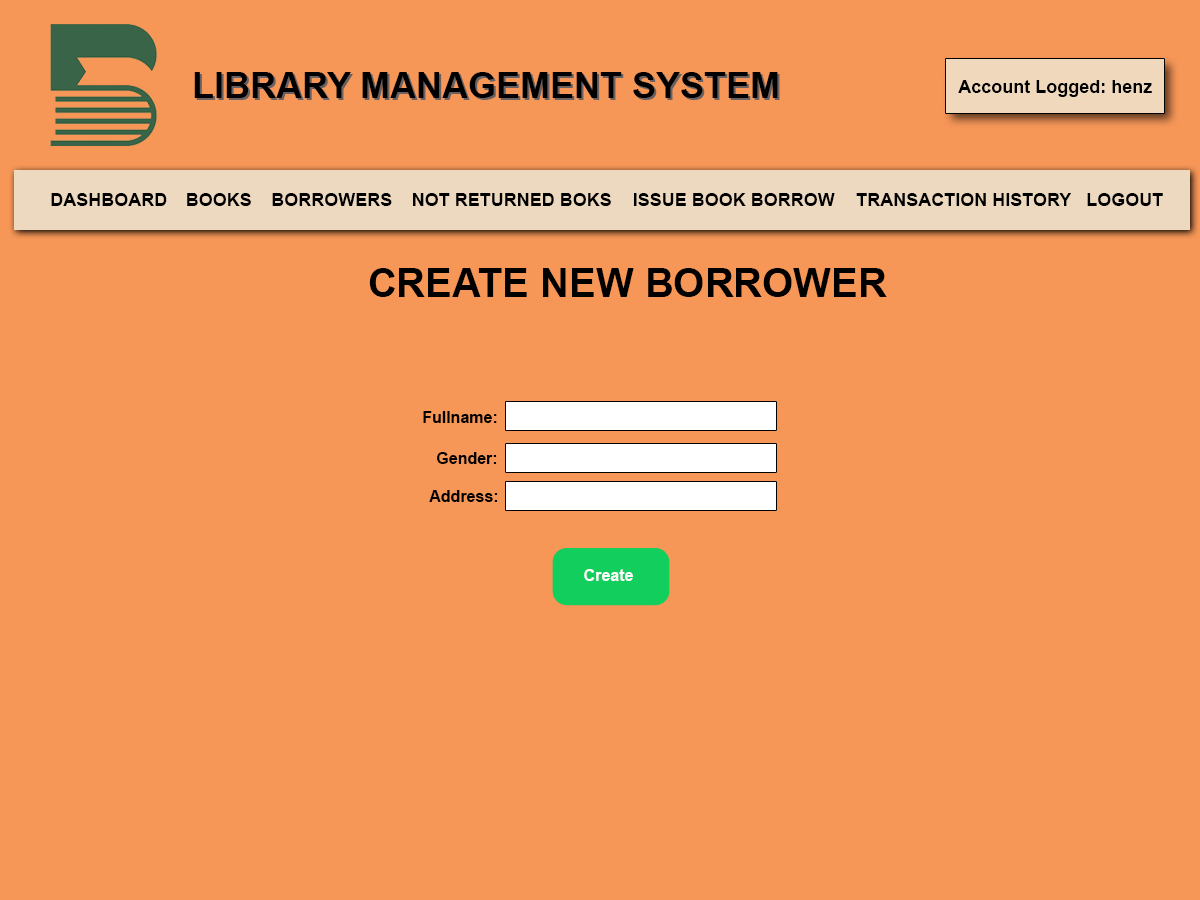
<style>
.page{position:relative;width:1200px;height:900px;background:#f69657}
.page>*{position:absolute;margin:0}
.t1{font:36px "Arial-BoldMT";color:#000000}
.t2{font:18px "Arial-BoldMT";color:#000000}
.t3{font:40px "Arial-BoldMT";color:#000000}
.t4{font:16px "Arial-BoldMT";color:#000000}
.t5{font:16px "Arial-BoldMT";color:#ffffff}
</style>
<div class="page">
<p class="t1" style="left:194px;top:72px;width:584px;height:26px">LIBRARY MANAGEMENT SYSTEM</p>
<p class="t2" style="left:958px;top:80px;width:194px;height:17px">Account Logged: henz</p>
<p class="t2" style="left:51px;top:193px;width:116px;height:13px">DASHBOARD</p>
<p class="t2" style="left:187px;top:193px;width:64px;height:13px">BOOKS</p>
<p class="t2" style="left:272px;top:193px;width:120px;height:13px">BORROWERS</p>
<p class="t2" style="left:413px;top:193px;width:198px;height:13px">NOT RETURNED BOKS</p>
<p class="t2" style="left:634px;top:193px;width:201px;height:13px">ISSUE BOOK BORROW</p>
<p class="t2" style="left:856px;top:193px;width:216px;height:13px">TRANSACTION HISTORY</p>
<p class="t2" style="left:1087px;top:193px;width:76px;height:13px">LOGOUT</p>
<p class="t3" style="left:369px;top:268px;width:518px;height:29px">CREATE NEW BORROWER</p>
<p class="t4" style="left:423px;top:411px;width:74px;height:12px">Fullname:</p>
<p class="t4" style="left:437px;top:452px;width:60px;height:12px">Gender:</p>
<p class="t4" style="left:429px;top:490px;width:69px;height:12px">Address:</p>
<p class="t5" style="left:584px;top:569px;width:49px;height:12px">Create</p>
</div>
